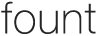
<style>
.page{position:relative;width:96px;height:36px;background:#ffffff}
.page>*{position:absolute;margin:0}
.t1{font:43.7px "HelveticaNeue-Thin";letter-spacing:0.025em;color:#242424}
</style>
<div class="page">
<p class="t1" style="left:1px;top:1px;width:95px;height:33px">fount</p>
</div>
